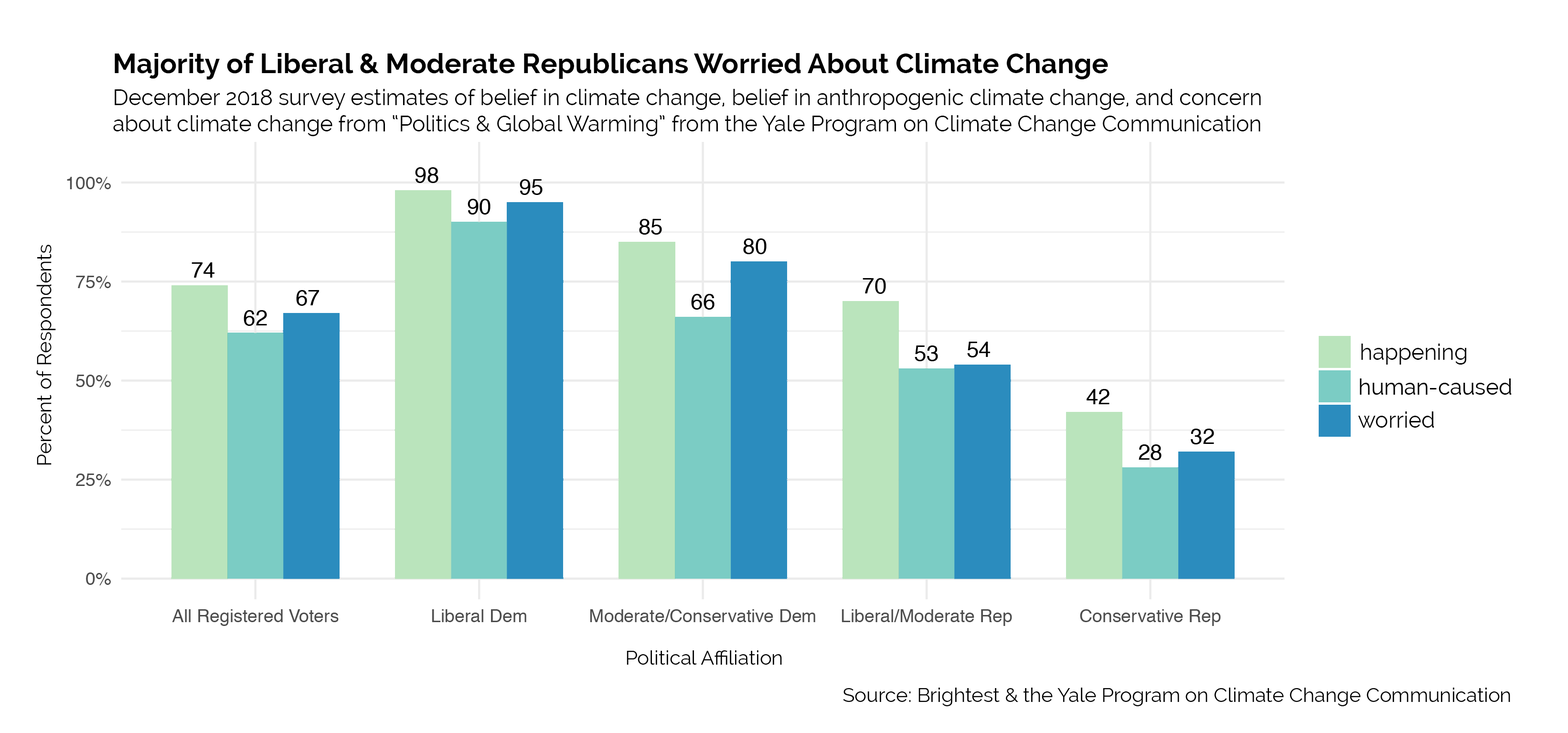
<style>
.page{position:relative;width:1568px;height:733px;background:#ffffff}
.page>*{position:absolute;margin:0}
.t1{font:27.9px "Raleway-Bold";color:#000000}
.t2{font:21.9px "Raleway";color:#000000}
.t3{font:19.9px "Raleway";color:#000000}
</style>
<div class="page">
<p class="t1" style="left:115px;top:53px;width:993px;height:27px">Majority of Liberal &amp; Moderate Republicans Worried About Climate Change</p>
<p class="t2" style="left:113px;top:89px;width:1148px;height:47px">December 2018 survey estimates of belief in climate change, belief in anthropogenic climate change, and concern about climate change from “Politics &amp; Global Warming” from the Yale Program on Climate Change Communication</p>
<p class="t3" style="left:36px;top:245px;width:20px;height:220px;rotate:-90deg">Percent of Respondents</p>
<p class="t2" style="left:1361px;top:343px;width:105px;height:21px">happening</p>
<p class="t2" style="left:1358px;top:411px;width:76px;height:16px">worried</p>
<p class="t3" style="left:627px;top:650px;width:155px;height:14px">Political Affiliation</p>
<p class="t3" style="left:843px;top:687px;width:667px;height:19px">Source: Brightest &amp; the Yale Program on Climate Change Communication</p>
</div>
